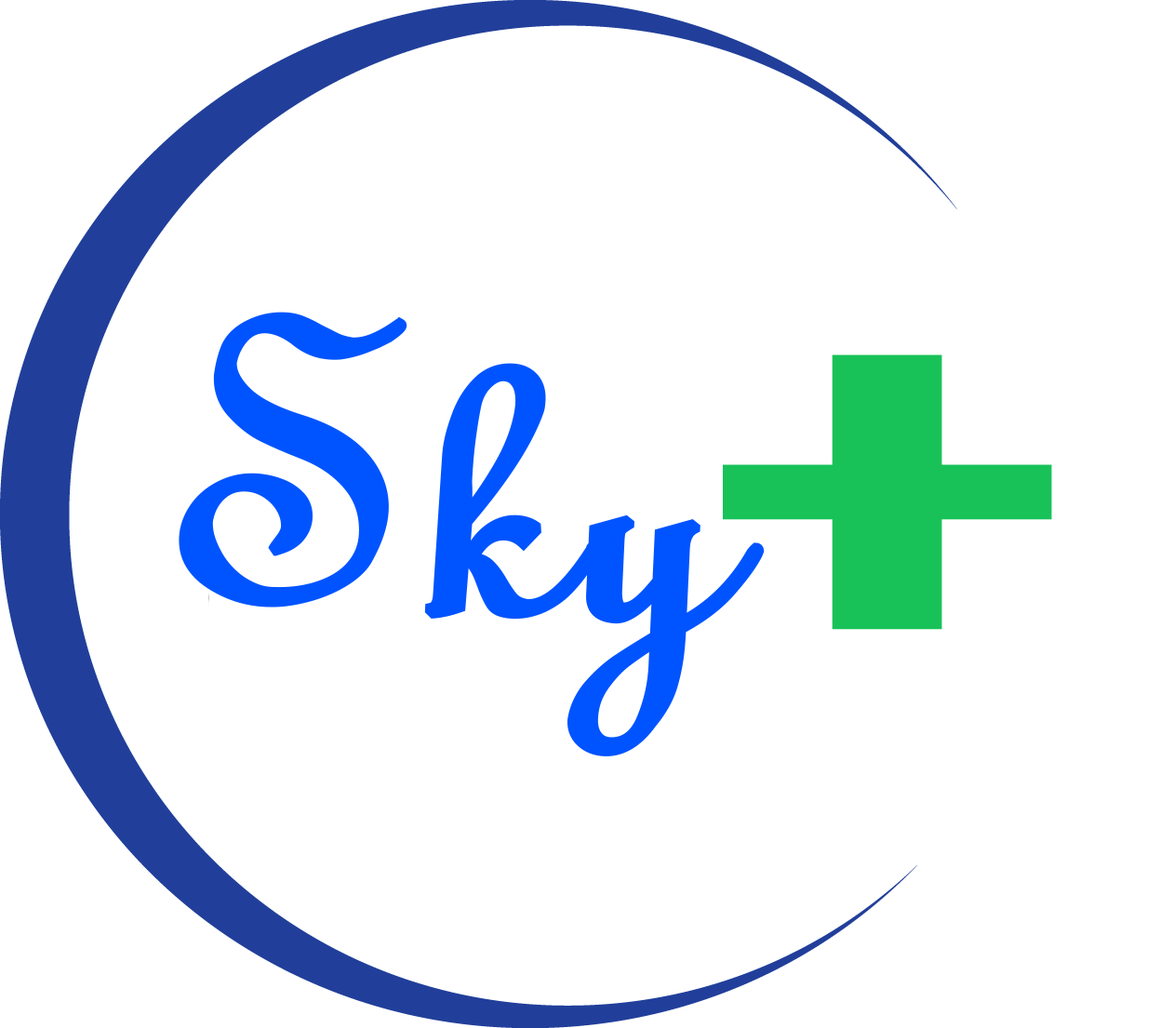
<style>
.page{position:relative;width:1160px;height:1028px;background:#ffffff}
.page>*{position:absolute;margin:0}
.t1{font:445.7px "LinusPlain";color:#0155ff;font-weight:bold}
.t2{font:701.6px "Fixedsys";color:#18c258}
</style>
<div class="page">
<p class="t1" style="left:179px;top:312px;width:586px;height:444px;rotate:3deg">Sky</p>
<p class="t2" style="left:723px;top:354px;width:329px;height:276px">+</p>
</div>
